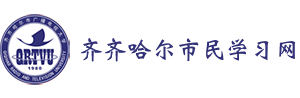
<style>
.page{position:relative;width:300px;height:98px;background:#ffffff}
.page>*{position:absolute;margin:0}
.t1{font:24.8px "Weibei-SC-Bold";color:#323177}
</style>
<div class="page">
<p class="t1" style="left:80px;top:38px;width:216px;height:24px">齐齐哈尔市民学习网</p>
</div>
